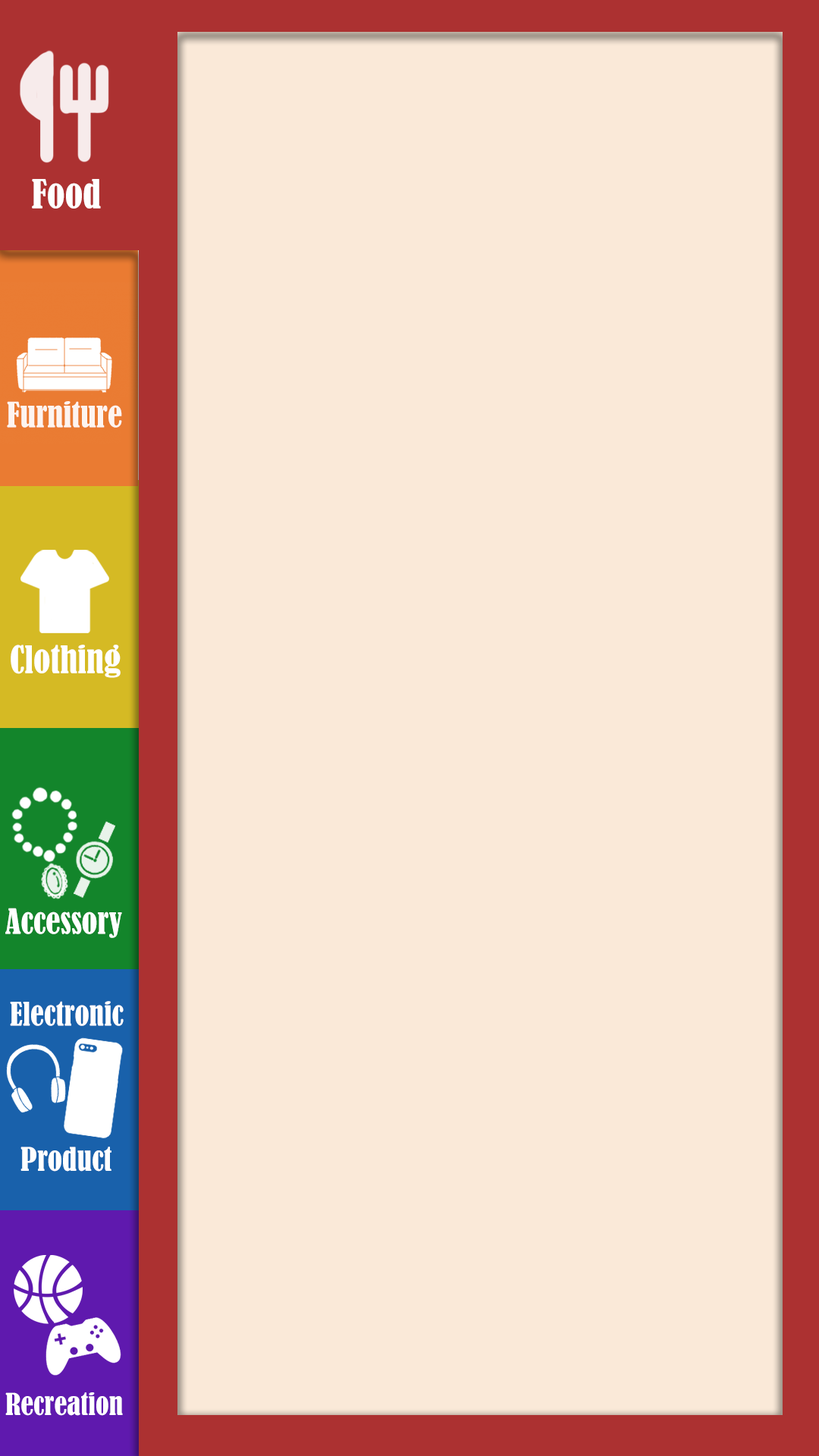
<style>
.page{position:relative;width:819px;height:1456px;background:#fae9d8}
.page>*{position:absolute;margin:0}
.t1{font:37.4px "BernardMT-Condensed";color:#ffffff}
.t2{font:32.4px "BernardMT-Condensed";color:#ffffff}
.t3{font:35.4px "BernardMT-Condensed";color:#ffffff}
.t4{font:30.3px "BernardMT-Condensed";color:#ffffff}
.t5{font:28.3px "BernardMT-Condensed";color:#ffffff}
</style>
<div class="page">
<p class="t1" style="left:32px;top:179px;width:69px;height:30px">Food</p>
<p class="t2" style="left:7px;top:401px;width:115px;height:27px;opacity:0.95">Furniture</p>
<p class="t3" style="left:11px;top:645px;width:110px;height:33px">Clothing</p>
<p class="t2" style="left:5px;top:908px;width:117px;height:30px">Accessory</p>
<p class="t4" style="left:10px;top:1001px;width:114px;height:25px">Electronic</p>
<p class="t4" style="left:20px;top:1147px;width:91px;height:25px">Product</p>
<p class="t5" style="left:5px;top:1392px;width:118px;height:24px">Recreation</p>
</div>
